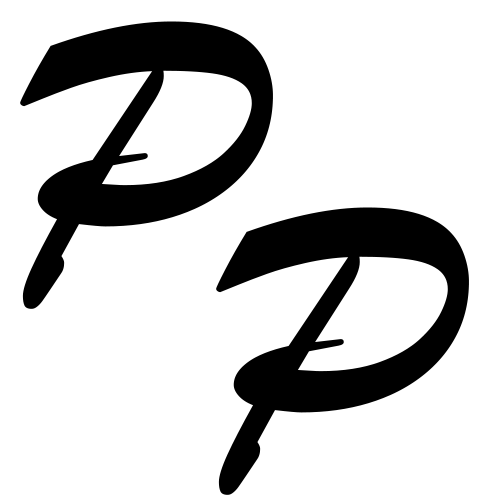
<style>
.page{position:relative;width:500px;height:500px;background:#ffffff}
.page>*{position:absolute;margin:0}
.t1{font:400px "BrushScriptMT";color:#000000}
</style>
<div class="page">
<p class="t1" style="left:20px;top:21px;width:253px;height:288px">P</p>
<p class="t1" style="left:216px;top:207px;width:253px;height:288px">P</p>
</div>
